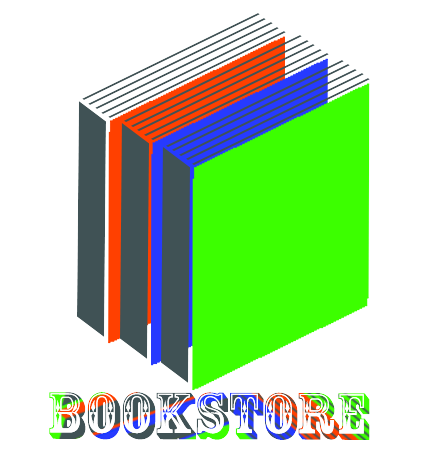
<style>
.page{position:relative;width:427px;height:469px;background:#ffffff}
.page>*{position:absolute;margin:0}
.t1{font:62.3px "RosewoodStd-Regular";color:#3cff00}
</style>
<div class="page">
<p class="t1" style="left:49px;top:392px;width:321px;height:48px">BOOKSTORE</p>
</div>
